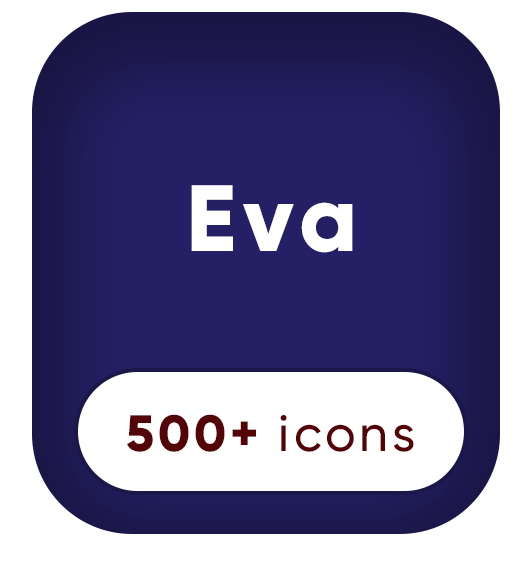
<style>
.page{position:relative;width:526px;height:563px;background:#ffffff}
.page>*{position:absolute;margin:0}
.t1{font:93.8px "Gilroy-ExtraBold";letter-spacing:0.075em;color:#ffffff}
.t2{font:50.9px "Gilroy-Medium";letter-spacing:0.075em;color:#540306}
.t3{font:50.9px "Gilroy-ExtraBold";letter-spacing:0.075em;color:#540306}
</style>
<div class="page">
<p class="t1" style="left:191px;top:185px;width:162px;height:68px">Eva</p>
<p class="t2" style="left:127px;top:414px;width:287px;height:38px"><span class="t3">500+ </span>icons</p>
</div>
